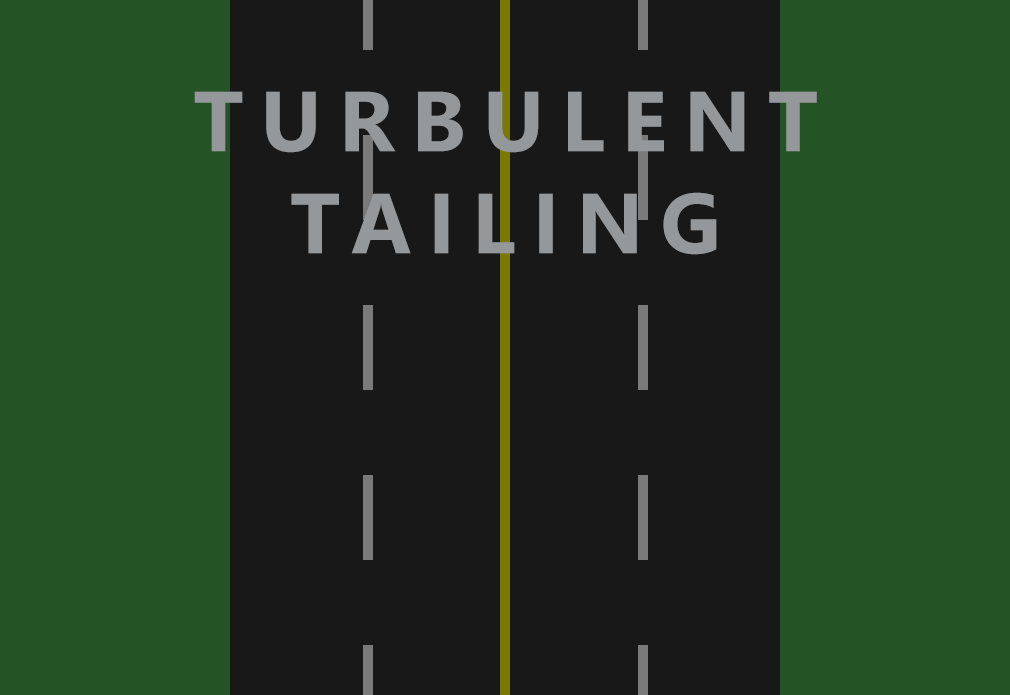
<style>
.page{position:relative;width:1010px;height:695px;background:#181818}
.page>*{position:absolute;margin:0}
.t1{font:85px "SegoeUI-Bold";letter-spacing:0.2em;color:#95989a}
</style>
<div class="page">
<p class="t1" style="left:194px;top:91px;width:623px;height:164px;text-align:center">TURBULENT<br>TAILING</p>
</div>
